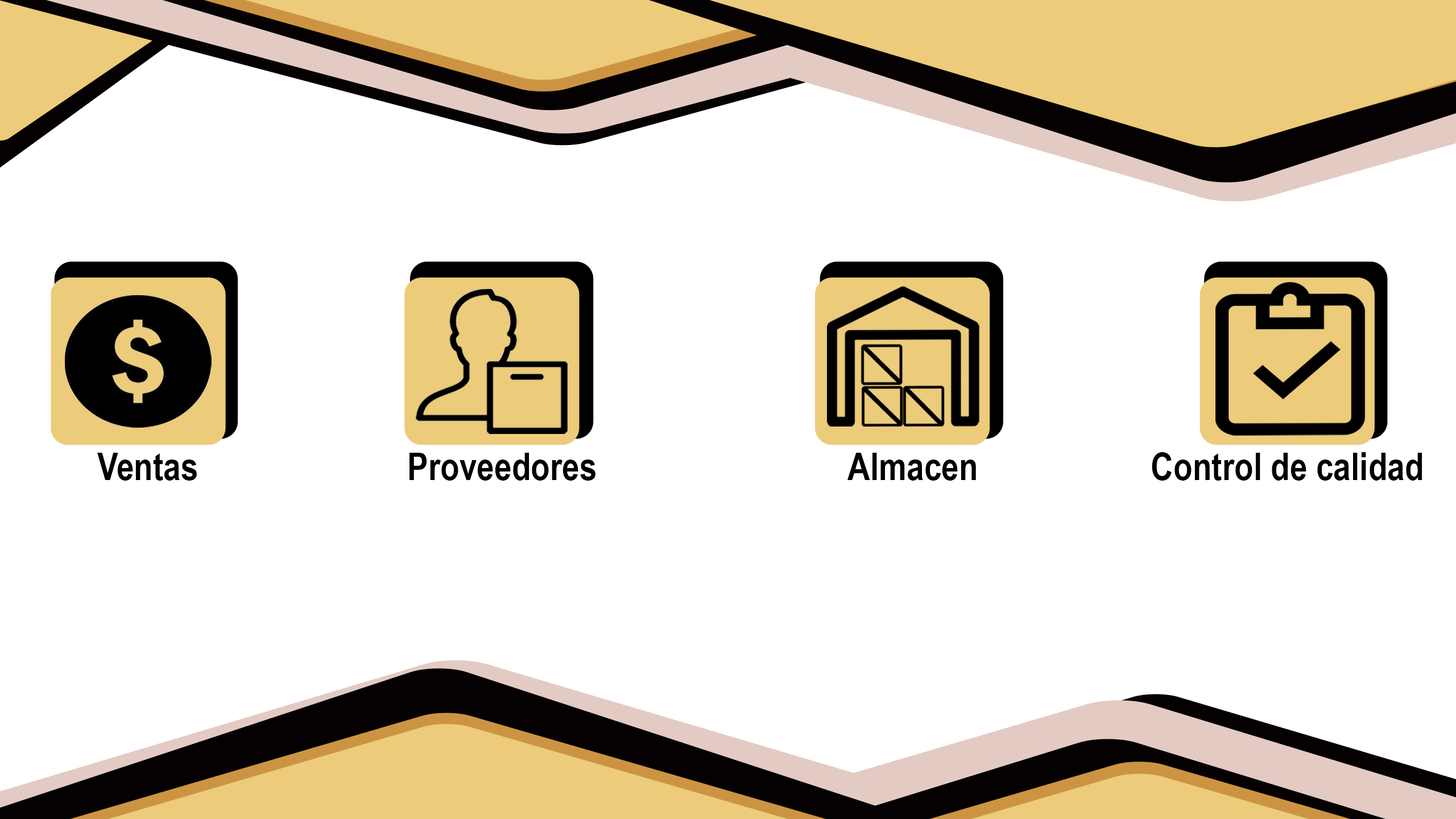
<style>
.page{position:relative;width:1456px;height:819px;background:#ffffff}
.page>*{position:absolute;margin:0}
.t1{font:38.2px "ArialNarrow-Bold";color:#000000}
</style>
<div class="page">
<p class="t1" style="left:97px;top:453px;width:100px;height:28px">Ventas</p>
<p class="t1" style="left:409px;top:453px;width:186px;height:28px">Proveedores</p>
<p class="t1" style="left:847px;top:453px;width:129px;height:28px">Almacen</p>
<p class="t1" style="left:1152px;top:452px;width:270px;height:29px">Control de calidad</p>
</div>
